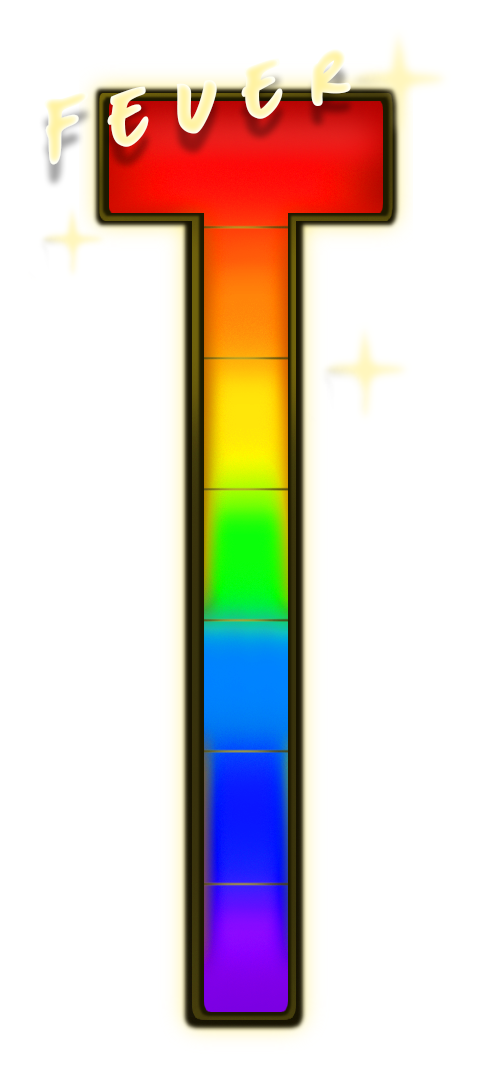
<style>
.page{position:relative;width:490px;height:1080px;background:#ffffff}
.page>*{position:absolute;margin:0}
.t1{font:108.3px "CecepsHandwriting";letter-spacing:0.2em}
</style>
<div class="page">
<p class="t1" style="left:44px;top:49px;width:307px;height:116px;rotate:-12deg">Fever</p>
</div>
